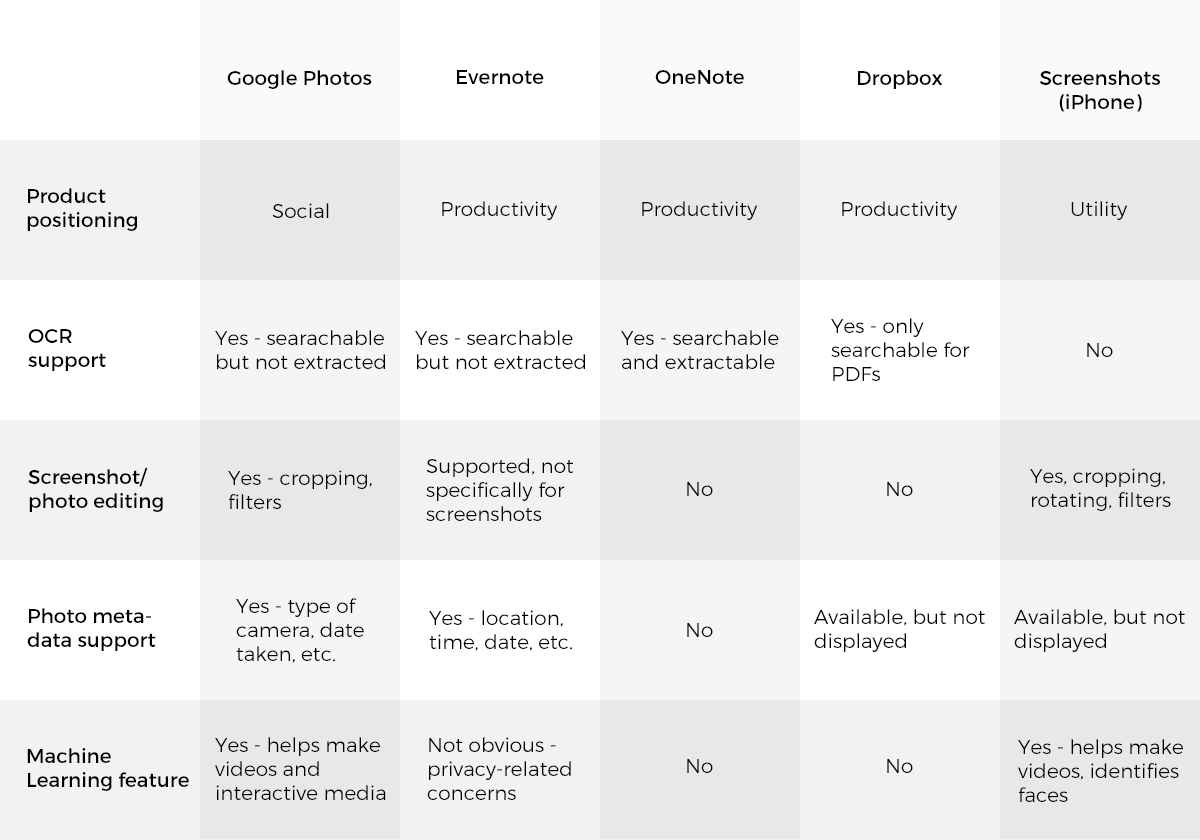
<style>
.page{position:relative;width:1200px;height:840px;background:#e8e8e8}
.page>*{position:absolute;margin:0}
.t1{font:20px "Montserrat-Regular";color:#000000}
.t2{font:20px/24px "Montserrat-Regular";color:#000000}
.t3{font:20px "Montserrat-Light";color:#000000}
.t4{font:20px/24px "Montserrat-Light";color:#000000}
</style>
<div class="page">
<p class="t1" style="left:227px;top:70px;width:145px;height:19px">Google Photos</p>
<p class="t1" style="left:457px;top:70px;width:87px;height:14px">Evernote</p>
<p class="t1" style="left:655px;top:70px;width:89px;height:14px">OneNote</p>
<p class="t1" style="left:858px;top:70px;width:85px;height:19px">Dropbox</p>
<p class="t2" style="left:1040px;top:70px;width:120px;height:42px;text-align:center">Screenshots<br>(iPhone)</p>
<p class="t2" style="left:27px;top:188px;width:110px;height:43px">Product<br>positioning</p>
<p class="t3" style="left:272px;top:203px;width:57px;height:15px">Social</p>
<p class="t3" style="left:442px;top:201px;width:116px;height:19px">Productivity</p>
<p class="t3" style="left:642px;top:201px;width:116px;height:19px">Productivity</p>
<p class="t3" style="left:842px;top:201px;width:116px;height:19px">Productivity</p>
<p class="t3" style="left:1071px;top:201px;width:57px;height:19px">Utility</p>
<p class="t4" style="left:831px;top:318px;width:139px;height:63px">Yes - only<br>searchable for <br>PDFs</p>
<p class="t2" style="left:28px;top:329px;width:78px;height:42px">OCR<br>support</p>
<p class="t4" style="left:215px;top:330px;width:170px;height:39px">Yes - searachable<br>but not extracted</p>
<p class="t4" style="left:415px;top:330px;width:170px;height:39px">Yes - searchable<br>but not extracted</p>
<p class="t4" style="left:621px;top:330px;width:158px;height:39px">Yes - searchable<br>and extractable</p>
<p class="t3" style="left:1087px;top:343px;width:26px;height:14px">No</p>
<p class="t4" style="left:426px;top:458px;width:148px;height:63px">Supported, not<br>specifically for<br>screenshots</p>
<p class="t2" style="left:28px;top:467px;width:135px;height:45px">Screenshot/<br>photo editing</p>
<p class="t4" style="left:228px;top:470px;width:144px;height:39px">Yes - cropping,<br>filters</p>
<p class="t4" style="left:1030px;top:468px;width:141px;height:43px">Yes, cropping, <br>rotating, filters</p>
<p class="t3" style="left:687px;top:482px;width:26px;height:14px">No</p>
<p class="t3" style="left:887px;top:482px;width:26px;height:14px">No</p>
<p class="t4" style="left:236px;top:598px;width:128px;height:65px">Yes - type of <br>camera, date<br>taken, etc.</p>
<p class="t2" style="left:27px;top:608px;width:129px;height:43px">Photo meta-<br>data support</p>
<p class="t4" style="left:429px;top:610px;width:143px;height:41px">Yes - location,<br>time, date, etc.</p>
<p class="t4" style="left:814px;top:609px;width:171px;height:43px">Available, but not<br>displayed</p>
<p class="t4" style="left:1014px;top:609px;width:171px;height:43px">Available, but not<br>displayed</p>
<p class="t3" style="left:687px;top:623px;width:26px;height:14px">No</p>
<p class="t4" style="left:215px;top:737px;width:171px;height:63px">Yes - helps make<br>videos and<br>interactive media</p>
<p class="t4" style="left:427px;top:737px;width:144px;height:63px">Not obvious -<br>privacy-related<br>concerns</p>
<p class="t2" style="left:27px;top:748px;width:162px;height:43px">Machine<br>Learning feature</p>
<p class="t4" style="left:1018px;top:739px;width:165px;height:63px">Yes - helps make<br>videos, identifies<br>faces</p>
<p class="t3" style="left:687px;top:759px;width:26px;height:14px">No</p>
<p class="t3" style="left:887px;top:759px;width:26px;height:14px">No</p>
</div>
